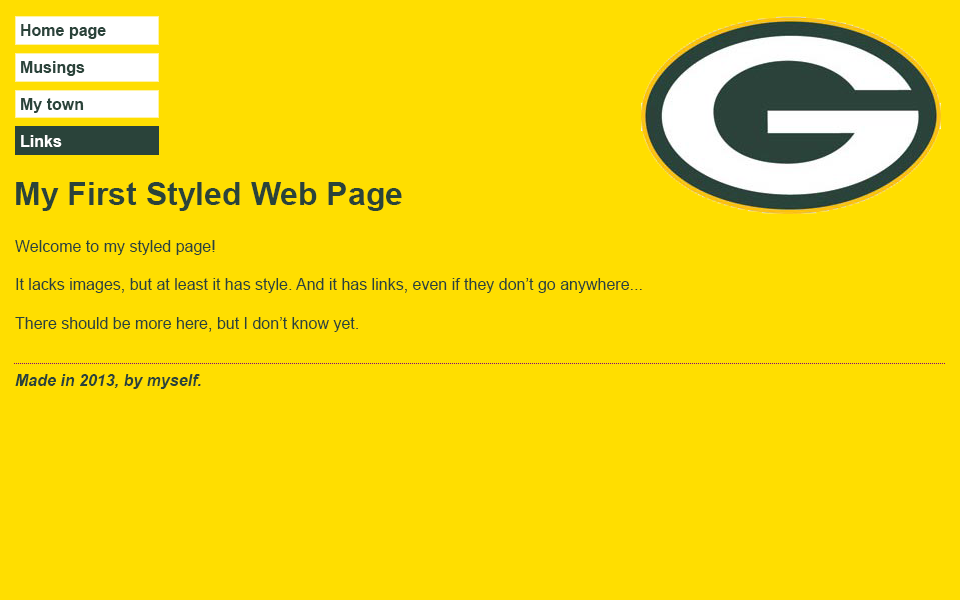
<style>
.page{position:relative;width:960px;height:600px;background:#ffde00}
.page>*{position:absolute;margin:0}
.t1{font:16px/37px "Arial-BoldMT";color:#2a433a}
.t2{font:16px/37px "Arial-BoldMT";color:#ffffff}
.t3{font:32px "Arial-BoldMT";color:#2a433a}
.t4{font:16px "ArialMT";color:#2a433a}
.t5{font:16px "Arial-BoldItalicMT";color:#2a433a}
</style>
<div class="page">
<p class="t1" style="left:21px;top:24px;width:85px;height:123px">Home page<br>Musings<br>My town<br><span class="t2">Links</span></p>
<p class="t3" style="left:16px;top:182px;width:386px;height:29px">My First Styled Web Page</p>
<p class="t4" style="left:15px;top:240px;width:627px;height:149px">Welcome to my styled page!<br><br>It lacks images, but at least it has style. And it has links, even if they don’t go anywhere...<br><br>There should be more here, but I don’t know yet.<br><br><br><span class="t5">Made in 2013, by myself.</span></p>
</div>
